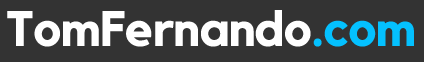
<style>
.page{position:relative;width:424px;height:62px;background:#333333}
.page>*{position:absolute;margin:0}
.t1{font:48.6px "Kollektif-Bold";letter-spacing:-0.03em;color:#ffffff;font-weight:bold}
.t2{font:48.6px "Kollektif-Bold";letter-spacing:-0.03em;color:#04c1ff;font-weight:bold}
</style>
<div class="page">
<p class="t1" style="left:7px;top:10px;width:407px;height:37px">TomFernando<span class="t2">.com</span></p>
</div>
